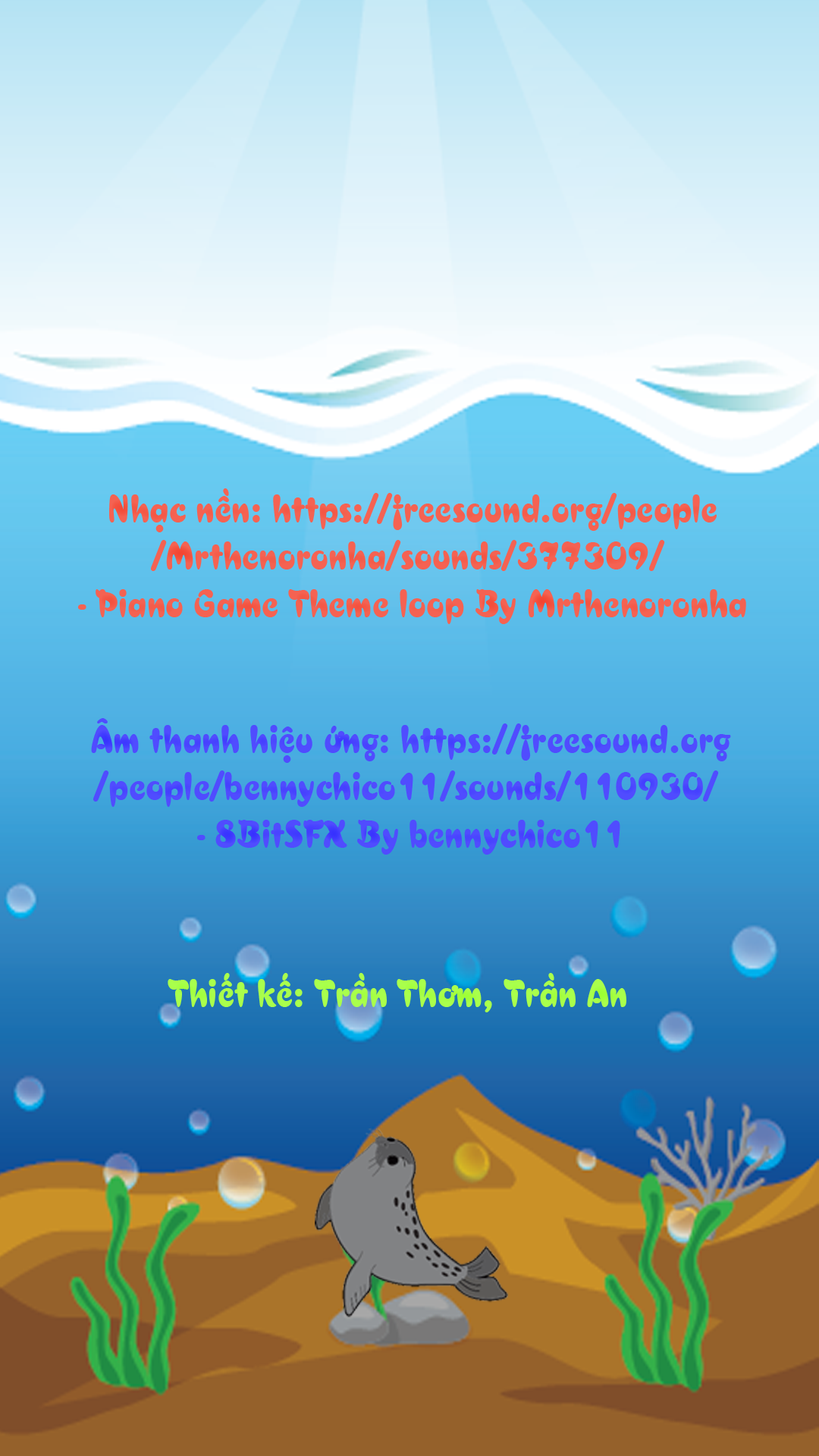
<style>
.page{position:relative;width:819px;height:1456px}
.page>*{position:absolute;margin:0}
.t1{font:39.4px "UVNBanhMi";color:#f56252}
.t2{font:39.4px "UVNBanhMi";color:#504cff}
.t3{font:39.4px "UVNBanhMi";color:#a9ff4c}
</style>
<div class="page">
<p class="t1" style="left:78px;top:488px;width:668px;height:136px;text-align:center">Nhạc nền: https://freesound.org/people<br>/Mrthenoronha/sounds/377309/ <br>- Piano Game Theme loop By Mrthenoronha</p>
<p class="t2" style="left:91px;top:718px;width:640px;height:137px;text-align:center">Âm thanh hiệu ứng: https://freesound.org<br>/people/bennychico11/sounds/110930/ <br>- 8BitSFX By bennychico11</p>
<p class="t3" style="left:168px;top:973px;width:458px;height:39px">Thiết kế: Trần Thơm, Trần An</p>
</div>
